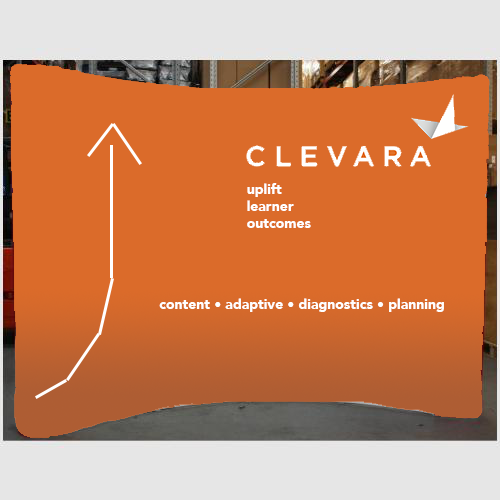
<style>
.page{position:relative;width:500px;height:500px;background:#db6b2a}
.page>*{position:absolute;margin:0}
.t1{font:14px "Avenir-Black";color:#ffffff}
</style>
<div class="page">
<p class="t1" style="left:247px;top:183px;width:64px;height:45px">uplift <br>learner<br>outcomes</p>
<p class="t1" style="left:159px;top:298px;width:285px;height:14px">content • adaptive • diagnostics • planning</p>
</div>
